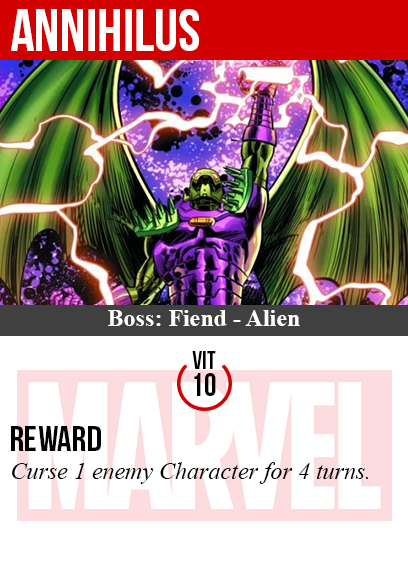
<style>
.page{position:relative;width:408px;height:585px;background:#ffffff}
.page>*{position:absolute;margin:0}
.t1{font:60px "BebasNeue";color:#ffffff}
.t2{font:24px "TimesNewRomanPS-BoldMT";color:#ffffff}
.t3{font:25px "BebasNeue";color:#000000}
.t4{font:32px "BebasNeue";color:#000000}
.t5{font:36px "BebasNeue";color:#000000}
.t6{font:24px "TimesNewRomanPS-ItalicMT";color:#000000}
</style>
<div class="page">
<p class="t1" style="left:11px;top:9px;width:188px;height:42px">annihilus</p>
<p class="t2" style="left:108px;top:310px;width:192px;height:16px">Boss: Fiend - Alien</p>
<p class="t3" style="left:192px;top:351px;width:24px;height:18px">vit</p>
<p class="t4" style="left:194px;top:373px;width:22px;height:23px">10</p>
<p class="t5" style="left:11px;top:426px;width:90px;height:25px">reward</p>
<p class="t6" style="left:12px;top:462px;width:357px;height:22px">Curse 1 enemy Character for 4 turns.</p>
</div>
